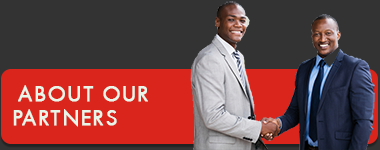
<style>
.page{position:relative;width:380px;height:150px;background:#333333}
.page>*{position:absolute;margin:0}
.t1{font:20px "FuturaICGBook";letter-spacing:0.1em;color:#e8f5e9;font-weight:bold}
</style>
<div class="page">
<p class="t1" style="left:13px;top:85px;width:135px;height:42px">ABOUT OUR<br>PARTNERS</p>
</div>
